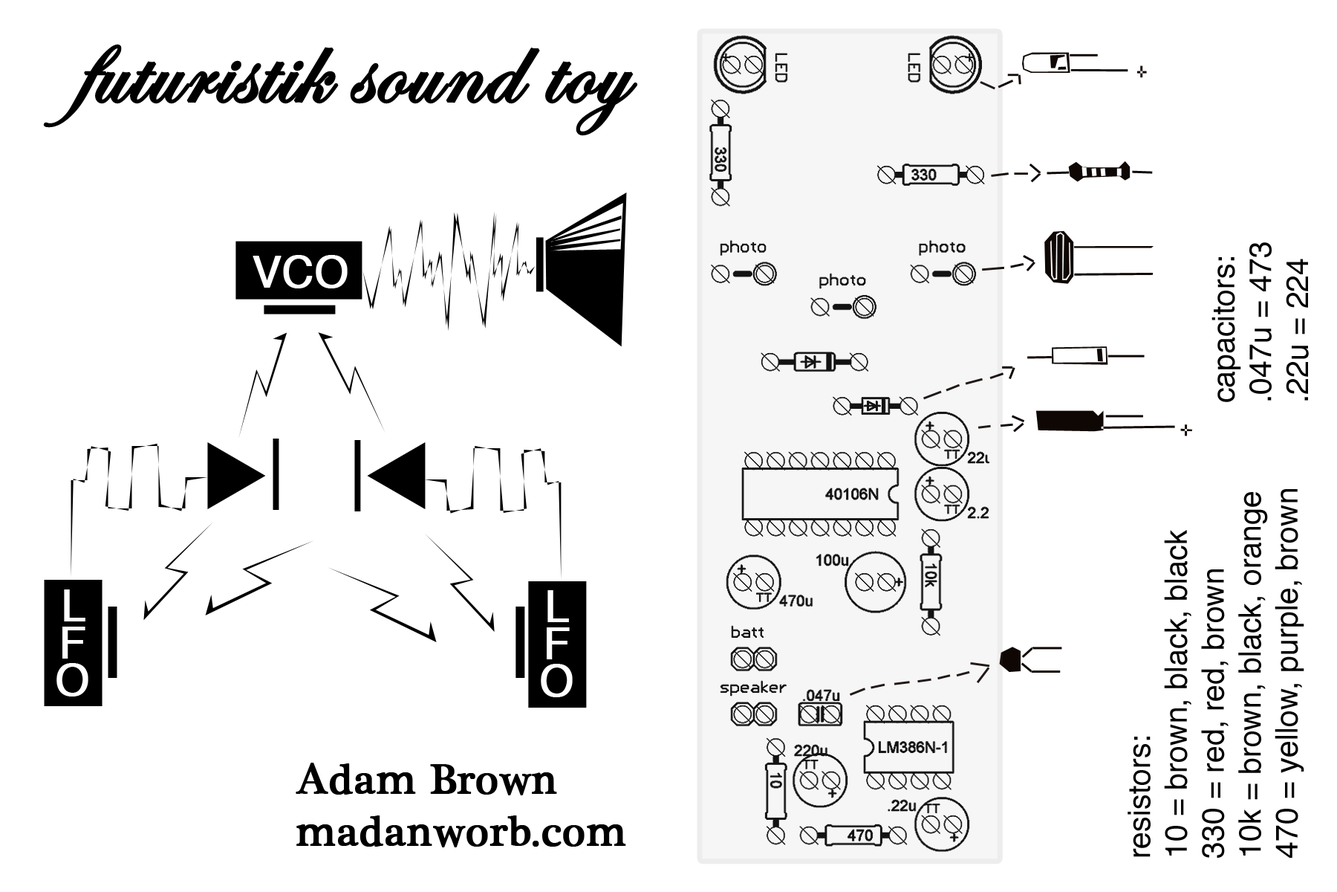
<style>
.page{position:relative;width:1337px;height:892px;background:#ffffff}
.page>*{position:absolute;margin:0}
.t1{font:102.7px "EdwardianScriptITC";color:#000000;font-weight:bold}
.t2{font:30.8px "Helvetica";color:#000000}
.t3{font:43.3px "Helvetica";color:#ffffff;font-weight:bold}
.t4{font:43.3px/37.2px "Helvetica";color:#ffffff;font-weight:bold}
.t5{font:43.3px "PlantagenetCherokee";color:#000000;font-weight:bold}
</style>
<div class="page">
<p class="t1" style="left:43px;top:44px;width:594px;height:92px">futuristik sound toy</p>
<p class="t2" style="left:1212px;top:242px;width:97px;height:160px;rotate:-90deg">capacitors: <br>.047u = 473<br>.22u = 224</p>
<p class="t3" style="left:253px;top:255px;width:95px;height:33px">VCO</p>
<p class="t2" style="left:1128px;top:489px;width:177px;height:368px;rotate:-90deg">resistors:<br>10 = brown, black, black<br>330 = red, red, brown<br>10k = brown, black, orange<br>470 = yellow, purple, brown</p>
<p class="t4" style="left:56px;top:589px;width:32px;height:107px;text-align:center">L<br>F<br>O</p>
<p class="t4" style="left:541px;top:590px;width:32px;height:107px;text-align:center">L<br>F<br>O</p>
<p class="t5" style="left:296px;top:762px;width:330px;height:85px">Adam Brown<br>madanworb.com</p>
</div>
